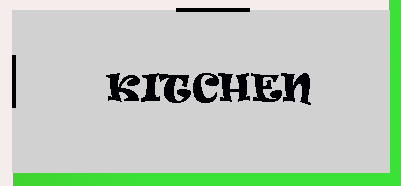
<style>
.page{position:relative;width:401px;height:186px;background:#d1d1d1}
.page>*{position:absolute;margin:0}
.t1{font:36px "Ravie";color:#000104}
</style>
<div class="page">
<p class="t1" style="left:106px;top:73px;width:205px;height:32px">KITCHEN</p>
</div>
